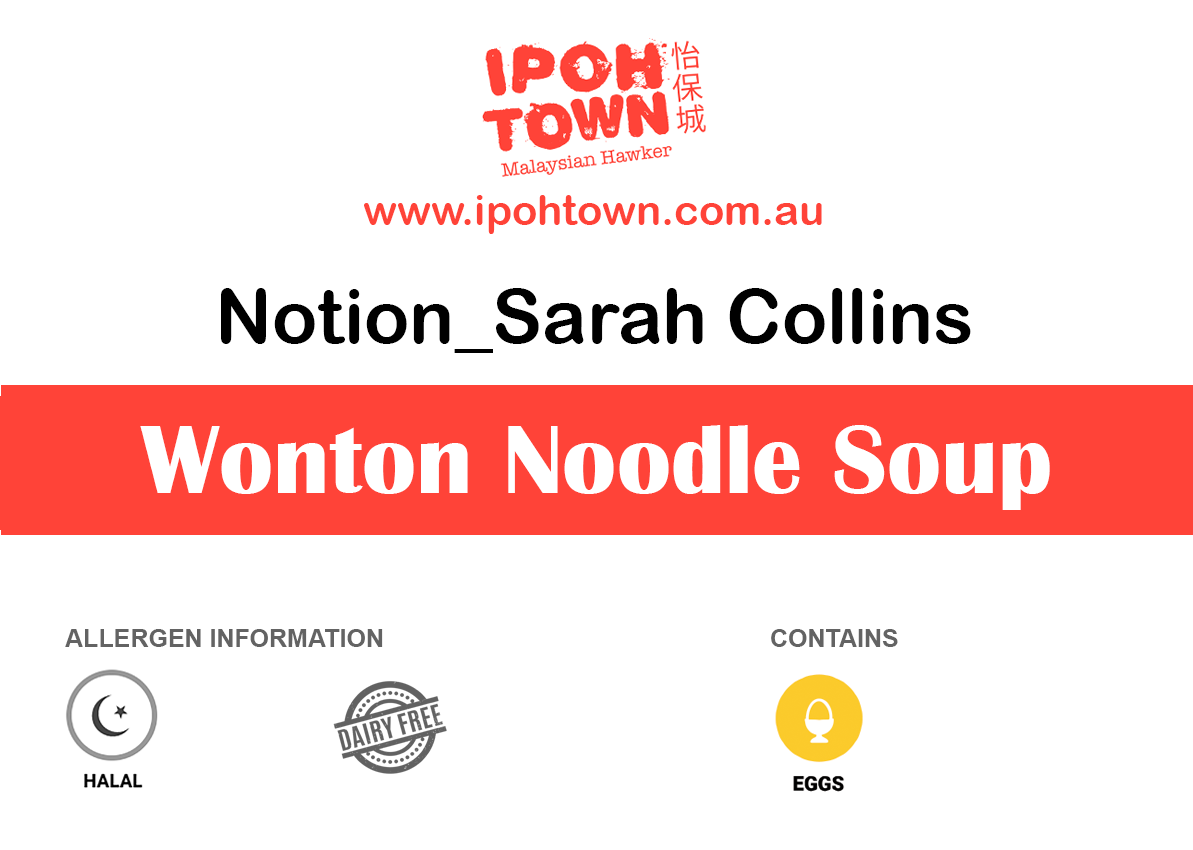
<style>
.page{position:relative;width:1193px;height:850px;background:#ffffff}
.page>*{position:absolute;margin:0}
.t1{font:41.7px "ArialRoundedMTBold";color:#ff4338}
.t2{font:75px "ArialRoundedMTBold";color:#000000}
.t3{font:100px "BritannicBold";color:#ffffff}
.t4{font:25px "Arial-BoldMT";color:#636363}
</style>
<div class="page">
<p class="t1" style="left:364px;top:195px;width:458px;height:39px">www.ipohtown.com.au</p>
<p class="t2" style="left:221px;top:288px;width:750px;height:65px">Notion_Sarah Collins</p>
<p class="t3" style="left:140px;top:425px;width:910px;height:85px">Wonton Noodle Soup</p>
<p class="t4" style="left:65px;top:629px;width:318px;height:18px">ALLERGEN INFORMATION</p>
<p class="t4" style="left:771px;top:629px;width:127px;height:18px">CONTAINS</p>
</div>
